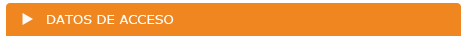
<style>
.page{position:relative;width:467px;height:36px;background:#f0861f}
.page>*{position:absolute;margin:0}
.t1{font:13px "Verdana";color:#fbfbf9}
</style>
<div class="page">
<p class="t1" style="left:47px;top:15px;width:127px;height:9px">DATOS DE ACCESO</p>
</div>
